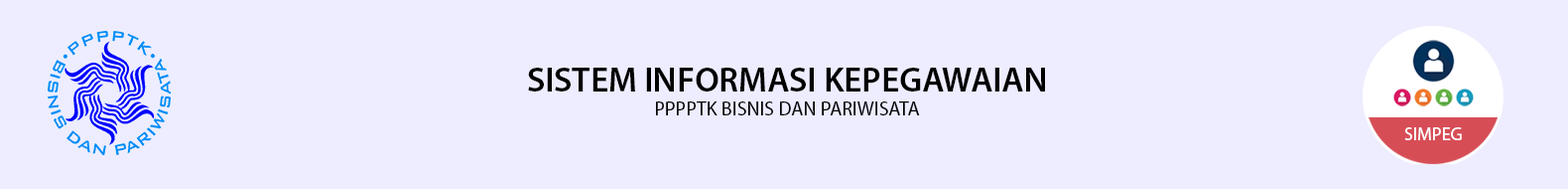
<style>
.page{position:relative;width:1568px;height:189px;background:#ededff}
.page>*{position:absolute;margin:0}
.t1{font:34.7px "MyriadPro-Semibold";color:#000000}
.t2{font:19.8px "MyriadPro-Regular";color:#000000}
.t3{font:18.2px "MyriadPro-Regular";color:#ffffff}
</style>
<div class="page">
<p class="t1" style="left:528px;top:67px;width:517px;height:48px;text-align:center">SISTEM INFORMASI KEPEGAWAIAN<br><span class="t2">PPPPTK BISNIS DAN PARIWISATA</span></p>
<p class="t3" style="left:1404px;top:127px;width:58px;height:13px">SIMPEG</p>
</div>
